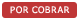
<style>
.page{position:relative;width:80px;height:20px;background:#bf3636}
.page>*{position:absolute;margin:0}
.t1{font:9px "WineTahomaBold";color:#fcf8f8}
</style>
<div class="page">
<p class="t1" style="left:10px;top:6px;width:60px;height:8px">POR COBRAR</p>
</div>
